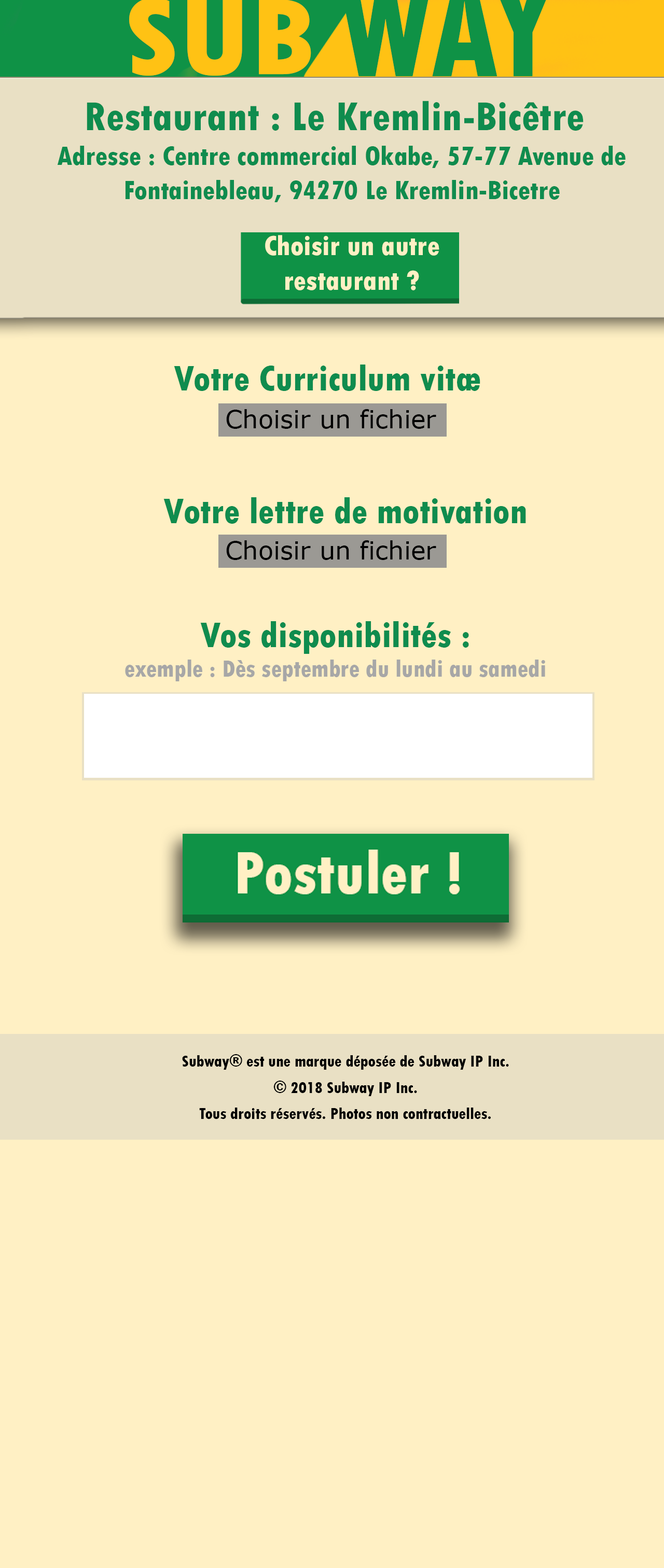
<style>
.page{position:relative;width:664px;height:1568px;background:#fff0c4}
.page>*{position:absolute;margin:0}
.t1{font:42.4px "TwCenMT-CondensedExtraBold";color:#0f8c4e}
.t2{font:28.3px "TwCenMT-CondensedExtraBold";color:#0f8c4e}
.t3{font:29px "TwCenMT-CondensedExtraBold";color:#fff0c4}
.t4{font:37.3px "TwCenMT-CondensedExtraBold";color:#0f8c4e}
.t5{font:24.9px "TwCenMT-CondensedExtraBold";color:#a7a7a7}
.t6{font:16.3px "TwCenMT-CondensedExtraBold";color:#000000}
</style>
<div class="page">
<p class="t1" style="left:87px;top:101px;width:496px;height:30px">Restaurant : Le Kremlin-Bicêtre</p>
<p class="t2" style="left:57px;top:146px;width:568px;height:56px;text-align:center">Adresse : Centre commercial Okabe, 57-77 Avenue de Fontainebleau, 94270 Le Kremlin-Bicetre</p>
<p class="t3" style="left:265px;top:235px;width:174px;height:55px;text-align:center">Choisir un autre restaurant ?</p>
<p class="t4" style="left:174px;top:365px;width:306px;height:26px">Votre Curriculum vitæ</p>
<p class="t4" style="left:163px;top:497px;width:363px;height:27px">Votre lettre de motivation</p>
<p class="t5" style="left:125px;top:621px;width:420px;height:60px;text-align:center"><span class="t4">Vos disponibilités :<br></span>exemple : Dès septembre du lundi au samedi</p>
<p class="t6" style="left:182px;top:1054px;width:327px;height:65px;text-align:center">Subway® est une marque déposée de Subway IP Inc.<br><br>© 2018 Subway IP Inc.<br><br>Tous droits réservés. Photos non contractuelles.</p>
</div>
